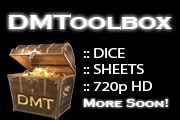
<style>
.page{position:relative;width:180px;height:120px;background:#000000}
.page>*{position:absolute;margin:0}
.t1{font:21.9px "CopperplateGothic-Bold";color:#ffffff;scale:1.17 1}
.t2{font:13.9px "MyriadPro-Regular";color:#ffffff;scale:1.17 1}
.t3{font:10.6px "CopperplateGothic-Bold";color:#ffffff;scale:1.25 1}
</style>
<div class="page">
<p class="t1" style="left:8px;top:14px;width:164px;height:16px">DMToolbox</p>
<p class="t2" style="left:83px;top:48px;width:69px;height:46px">:: DICE<br>:: SHEETS<br>:: 720p HD</p>
<p class="t3" style="left:83px;top:99px;width:85px;height:8px">More Soon!</p>
</div>
